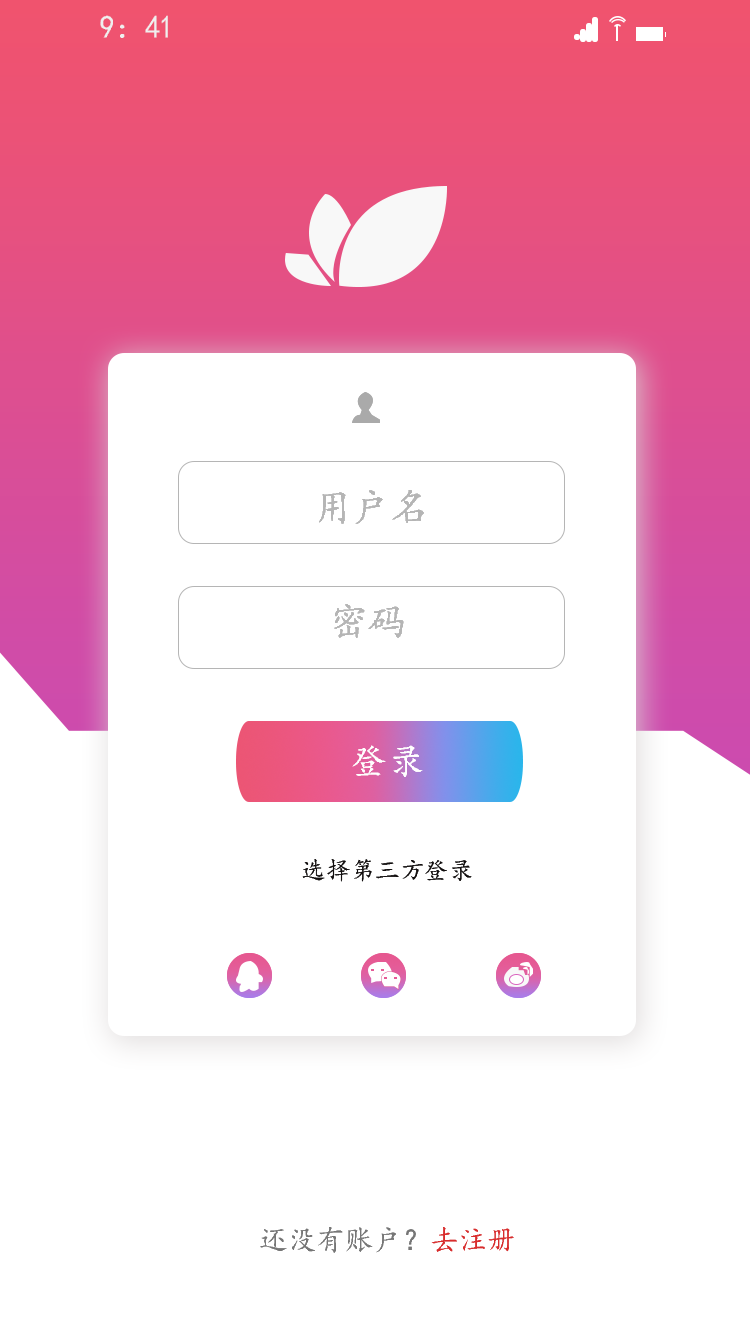
<style>
.page{position:relative;width:750px;height:1334px;background:#ffffff}
.page>*{position:absolute;margin:0}
.t1{font:31.6px "¿¬Ìå";color:#efefef;scale:0.94 1}
.t2{font:38.9px "¿¬Ìå";color:#b5b5b5}
.t3{font:38.5px "¿¬Ìå";color:#b5b5b5}
.t4{font:36.9px "¿¬Ìå";color:#ffffff}
.t5{font:24.7px "¿¬Ìå";color:#120e0e}
.t6{font:28.9px "¿¬Ìå";color:#767676}
.t7{font:28.9px "¿¬Ìå";color:#d92c2c}
</style>
<div class="page">
<p class="t1" style="left:100px;top:15px;width:68px;height:23px">9：41</p>
<p class="t2" style="left:319px;top:490px;width:105px;height:34px">用户名</p>
<p class="t2" style="left:319px;top:490px;width:105px;height:34px">用户名</p>
<p class="t2" style="left:319px;top:490px;width:105px;height:34px">用户名</p>
<p class="t2" style="left:319px;top:490px;width:105px;height:34px">用户名</p>
<p class="t3" style="left:334px;top:604px;width:70px;height:34px">密码</p>
<p class="t3" style="left:334px;top:604px;width:70px;height:34px">密码</p>
<p class="t3" style="left:334px;top:604px;width:70px;height:34px">密码</p>
<p class="t3" style="left:334px;top:604px;width:70px;height:34px">密码</p>
<p class="t4" style="left:352px;top:745px;width:71px;height:32px;rotate:180deg">登录</p>
<p class="t4" style="left:352px;top:745px;width:71px;height:32px;rotate:180deg">登录</p>
<p class="t5" style="left:302px;top:859px;width:170px;height:23px">选择第三方登录</p>
<p class="t5" style="left:302px;top:859px;width:170px;height:23px">选择第三方登录</p>
<p class="t6" style="left:260px;top:1227px;width:254px;height:26px">还没有账户？<span class="t7">去注册</span></p>
<p class="t6" style="left:260px;top:1227px;width:254px;height:26px">还没有账户？<span class="t7">去注册</span></p>
</div>
